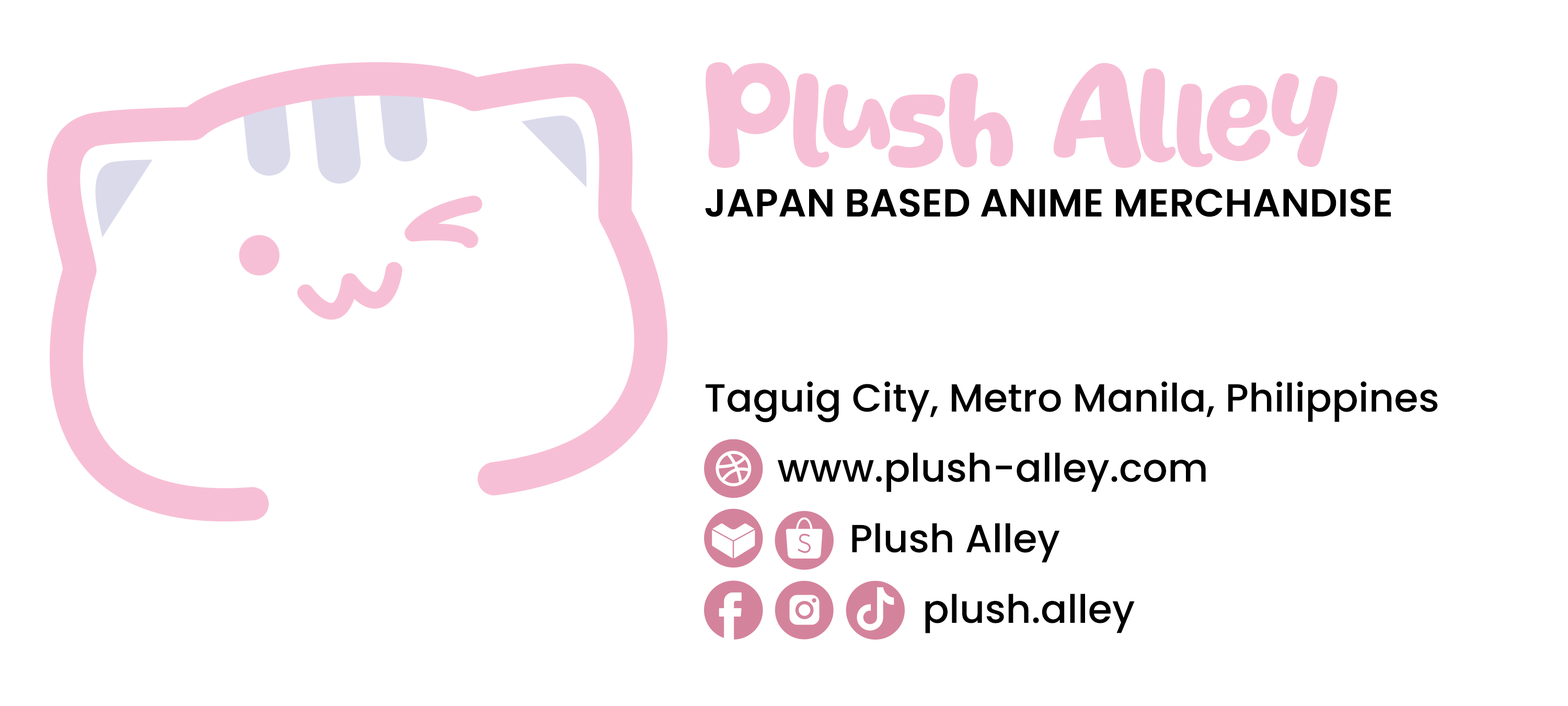
<style>
.page{position:relative;width:1568px;height:706px;background:#ffffff}
.page>*{position:absolute;margin:0}
.t1{font:39.2px "Poppins-SemiBold";color:#000000}
.t2{font:39.2px "Poppins-Medium";color:#000000}
</style>
<div class="page">
<p class="t1" style="left:705px;top:189px;width:686px;height:28px">JAPAN BASED ANIME MERCHANDISE</p>
<p class="t2" style="left:706px;top:381px;width:732px;height:41px">Taguig City, Metro Manila, Philippines</p>
<p class="t2" style="left:777px;top:452px;width:429px;height:40px">www.plush-alley.com</p>
<p class="t2" style="left:852px;top:523px;width:208px;height:39px">Plush Alley</p>
<p class="t2" style="left:925px;top:593px;width:210px;height:40px">plush.alley</p>
</div>
